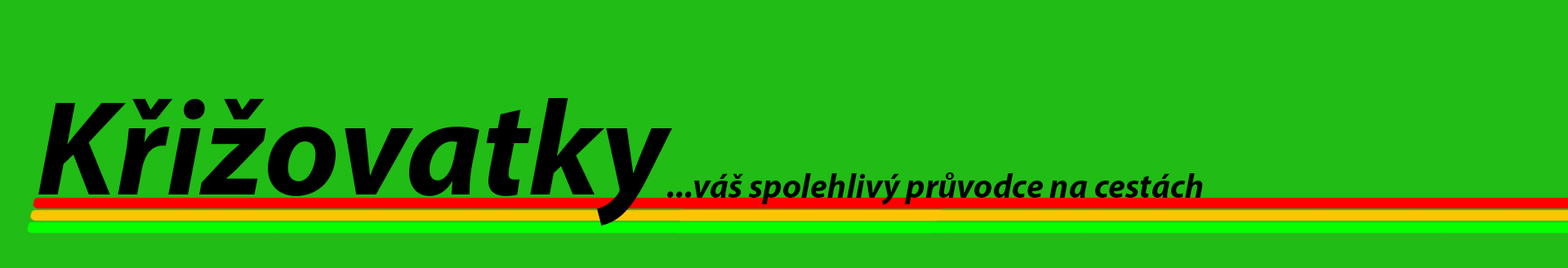
<style>
.page{position:relative;width:1568px;height:268px;background:#21bc15}
.page>*{position:absolute;margin:0}
.t1{font:136.1px "MyriadPro-BoldIt";color:#000000}
.t2{font:34px "MyriadPro-BoldIt";color:#000000}
</style>
<div class="page">
<p class="t1" style="left:38px;top:98px;width:634px;height:128px">Křižovatky</p>
<p class="t2" style="left:667px;top:172px;width:536px;height:33px">...váš spolehlivý průvodce na cestách</p>
</div>
